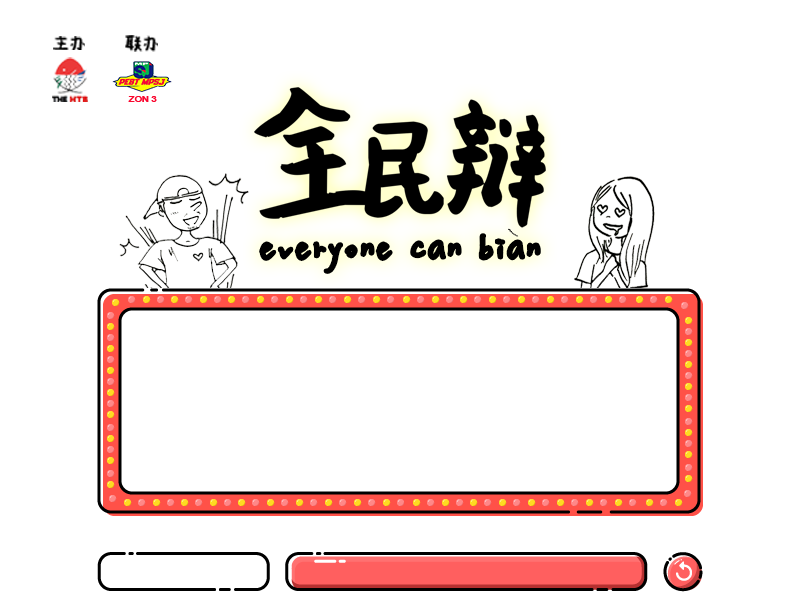
<style>
.page{position:relative;width:800px;height:600px;background:#ffffff}
.page>*{position:absolute;margin:0}
.t1{font:15.1px "HD-HPMST";color:#000000;scale:1.18 1}
.t2{font:8px "Arial-BoldMT";color:#fa062e;scale:1.18 1}
.t3{font:45.7px "HanyiSentySpringTrip";letter-spacing:0.1em;color:#000000}
</style>
<div class="page">
<p class="t1" style="left:53px;top:36px;width:32px;height:14px">主办</p>
<p class="t1" style="left:125px;top:35px;width:33px;height:17px">联办</p>
<p class="t2" style="left:128px;top:96px;width:29px;height:6px">ZON 3</p>
<p class="t3" style="left:261px;top:235px;width:278px;height:37px">everyone can bian</p>
</div>
